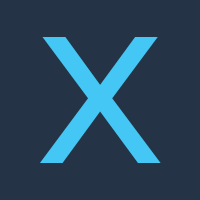
<style>
.page{position:relative;width:200px;height:200px;background:#243346}
.page>*{position:absolute;margin:0}
.t1{font:260px "ProximaNova-Regular";color:#44c7f4}
</style>
<div class="page">
<p class="t1" style="left:40px;top:37px;width:121px;height:126px">x</p>
</div>
